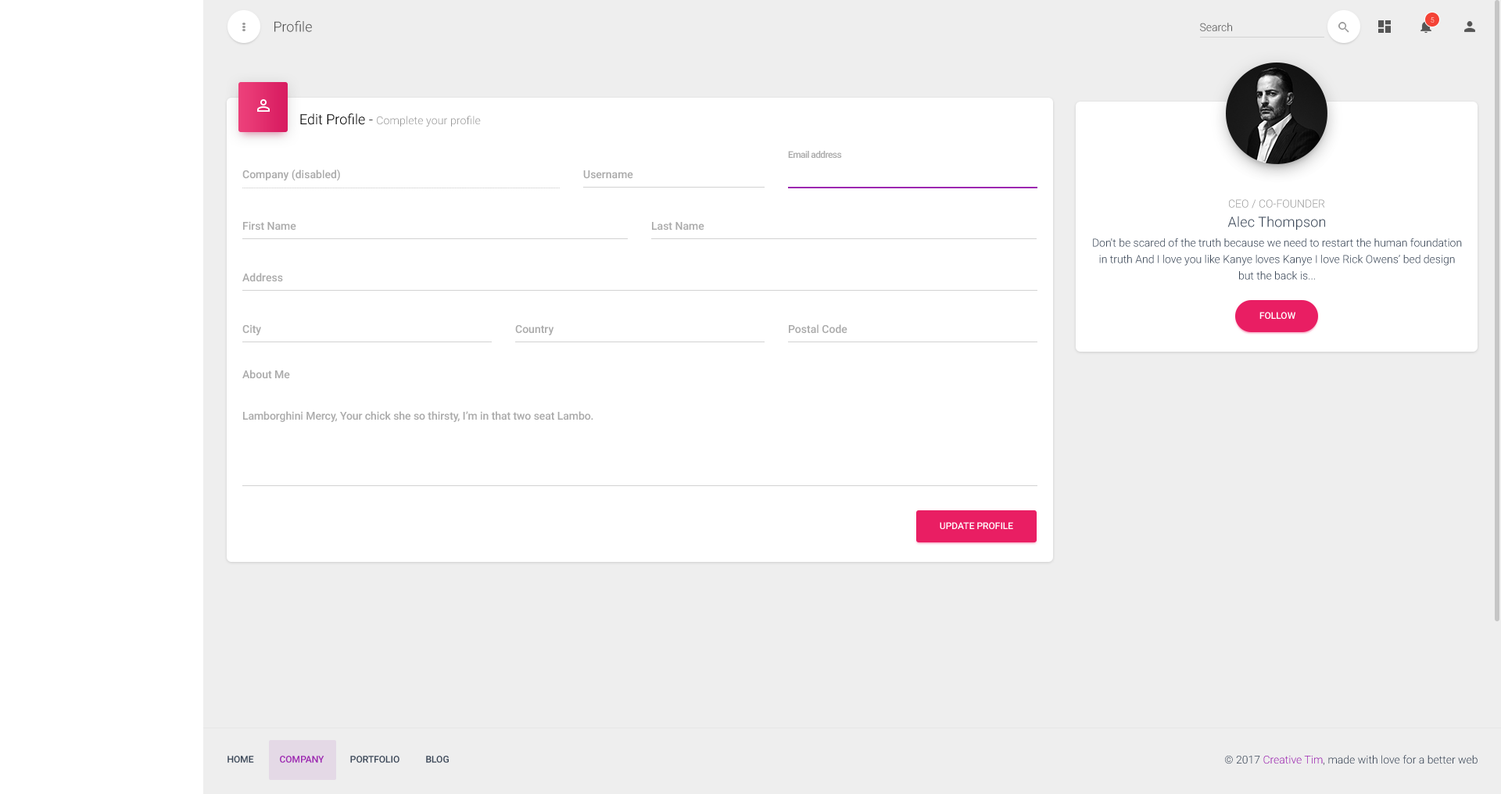
<style>
.page{position:relative;width:1501px;height:794px;background:#ffffff}
.page>*{position:absolute;margin:0}
.t1{font:7px "Roboto-Light"}
.t2{font:14.1px "Roboto-Light";color:#555555}
.t3{font:10.9px "Roboto-Light";color:#555555}
.t4{font:10.9px "Roboto-Light";letter-spacing:0.01em;color:#999999}
.t5{font:14.1px "Roboto-Light";color:#000000}
.t6{font:9.4px "Roboto-Medium";letter-spacing:-0.05em;color:#aaaaaa}
.t7{font:10.9px "Roboto-Medium";color:#aaaaaa}
.t8{font:10.9px "Roboto-Light";color:#999999}
.t9{font:14.1px "Roboto-Light";letter-spacing:0.01em;color:#3c4858}
.t10{font:10.9px/16.4px "Roboto-Light";color:#3c4858}
.t11{font:9.4px "Roboto-Medium";color:#ffffff}
.t12{font:10.9px "Roboto-Medium";letter-spacing:-0.005em;color:#aaaaaa}
.t13{font:9.4px "Roboto-Medium";color:#3c4858}
.t14{font:9.4px "Roboto-Medium";color:#9c27b0}
.t15{font:10.9px "Roboto-Light";color:#3c4858}
.t16{font:10.9px "Roboto-Light";color:#9c27b0}
</style>
<div class="page">
<p class="t1" style="left:1431px;top:17px;width:4px;height:6px">5</p>
<p class="t2" style="left:274px;top:20px;width:38px;height:12px">Profile</p>
<p class="t3" style="left:1200px;top:23px;width:32px;height:8px">Search</p>
<p class="t4" style="left:300px;top:113px;width:181px;height:14px"><span class="t5">Edit Profile - </span>Complete your profile</p>
<p class="t6" style="left:788px;top:151px;width:54px;height:7px">Email address</p>
<p class="t7" style="left:242px;top:169px;width:98px;height:12px">Company (disabled)</p>
<p class="t7" style="left:583px;top:170px;width:50px;height:9px">Username</p>
<p class="t8" style="left:1229px;top:199px;width:96px;height:10px">CEO / CO-FOUNDER</p>
<p class="t7" style="left:243px;top:221px;width:53px;height:10px">First Name</p>
<p class="t9" style="left:1227px;top:216px;width:98px;height:14px">Alec Thompson</p>
<p class="t7" style="left:652px;top:222px;width:52px;height:9px">Last Name</p>
<p class="t10" style="left:1093px;top:238px;width:369px;height:42px;text-align:center">Don't be scared of the truth because we need to restart the human foundation in truth And I love you like Kanye loves Kanye I love Rick Owens’ bed design but the back is...</p>
<p class="t7" style="left:242px;top:273px;width:41px;height:9px">Address</p>
<p class="t11" style="left:1260px;top:312px;width:36px;height:7px">FOLLOW</p>
<p class="t7" style="left:242px;top:324px;width:19px;height:11px">City</p>
<p class="t7" style="left:515px;top:325px;width:39px;height:10px">Country</p>
<p class="t7" style="left:789px;top:324px;width:59px;height:10px">Postal Code</p>
<p class="t7" style="left:242px;top:370px;width:48px;height:9px">About Me</p>
<p class="t12" style="left:243px;top:411px;width:350px;height:11px">Lamborghini Mercy, Your chick she so thirsty, I’m in that two seat Lambo.</p>
<p class="t11" style="left:940px;top:522px;width:73px;height:7px">UPDATE PROFILE</p>
<p class="t13" style="left:228px;top:756px;width:26px;height:7px">HOME</p>
<p class="t14" style="left:280px;top:756px;width:44px;height:7px">COMPANY</p>
<p class="t13" style="left:350px;top:756px;width:50px;height:7px">PORTFOLIO</p>
<p class="t13" style="left:426px;top:756px;width:23px;height:7px">BLOG</p>
<p class="t15" style="left:1225px;top:755px;width:253px;height:10px">© 2017 <span class="t16">Creative Tim</span>, made with love for a better web</p>
</div>
